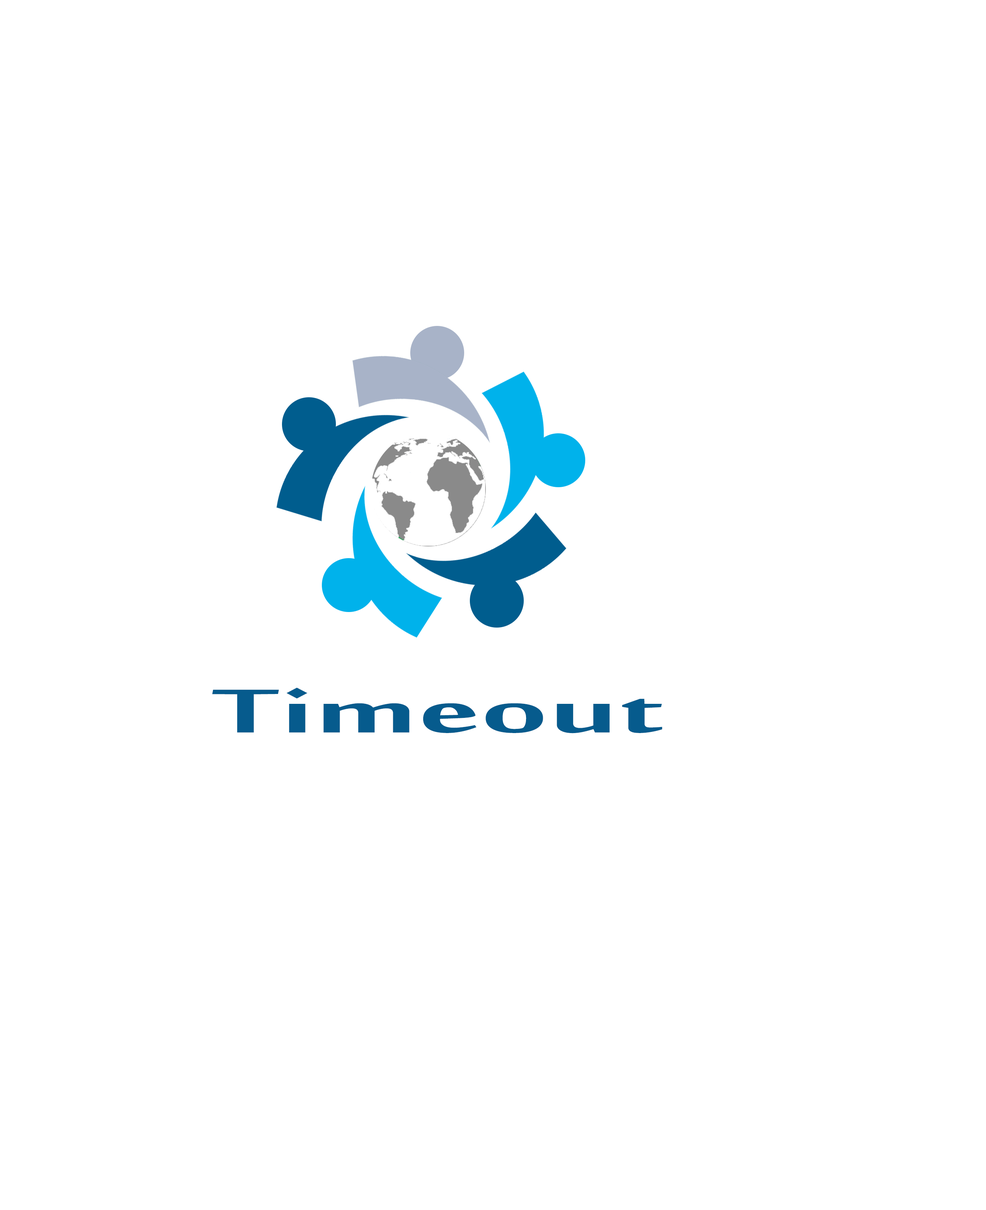
<style>
.page{position:relative;width:986px;height:1210px;background:#ffffff}
.page>*{position:absolute;margin:0}
.t1{font:94.8px "MoolBoran";color:#065b8d;scale:2 1}
</style>
<div class="page">
<p class="t1" style="left:212px;top:687px;width:450px;height:46px">Timeout</p>
</div>
